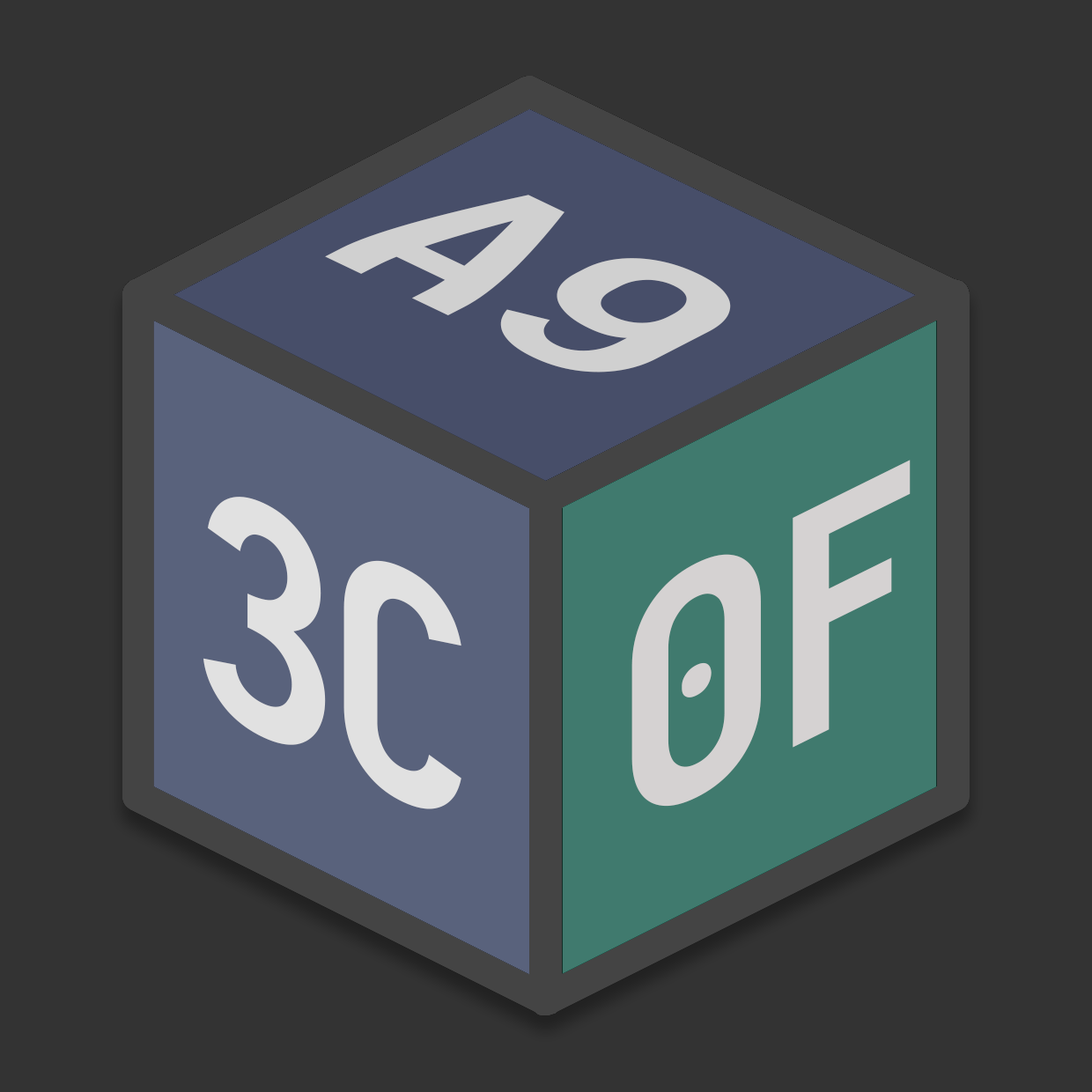
<style>
.page{position:relative;width:1092px;height:1092px;background:#333333}
.page>*{position:absolute;margin:0}
.t1{font:244.4px "Iosevka-Bold";color:#d0d0d0;scale:1.36 1}
.t2{font:311.9px "Iosevka-Bold";color:#d5d2d2;scale:1.08 1}
.t3{font:311.9px "Iosevka-Bold";color:#e1e1e1}
</style>
<div class="page">
<p class="t1" style="left:325px;top:195px;width:406px;height:178px;rotate:26deg">A9</p>
<p class="t2" style="left:631px;top:460px;width:280px;height:347px;rotate:-26deg">0F</p>
<p class="t3" style="left:203px;top:497px;width:258px;height:312px;rotate:25deg">3C</p>
</div>
